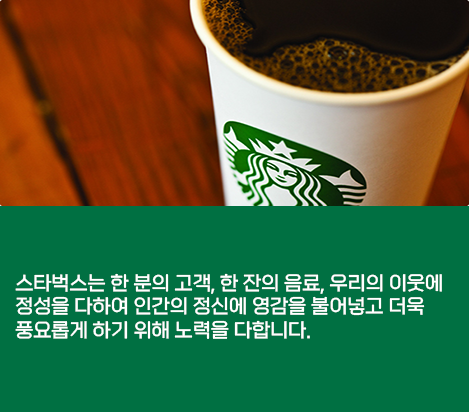
<style>
.page{position:relative;width:469px;height:412px;background:#007042}
.page>*{position:absolute;margin:0}
.t1{font:19.7px "esamanruLight";color:#ffffff}
</style>
<div class="page">
<p class="t1" style="left:15px;top:273px;width:427px;height:66px">스타벅스는 한 분의 고객, 한 잔의 음료, 우리의 이웃에 <br>정성을 다하여 인간의 정신에 영감을 불어넣고 더욱 <br>풍요롭게 하기 위해 노력을 다합니다.</p>
</div>
